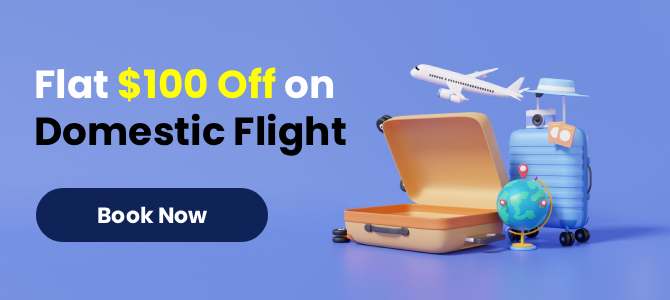
<style>
.page{position:relative;width:670px;height:300px}
.page>*{position:absolute;margin:0}
.t1{font:39px "Poppins-Bold";color:#000000}
.t2{font:39px "Poppins-Bold";color:#ffffff}
.t3{font:39px "Poppins-Bold";color:#fffe05}
.t4{font:22px "Poppins-Bold";color:#ffffff}
</style>
<div class="page">
<p class="t1" style="left:36px;top:67px;width:310px;height:89px"><span class="t2">Flat </span><span class="t3">$100 Off </span><span class="t2">on<br></span>Domestic Flight</p>
<p class="t4" style="left:98px;top:206px;width:109px;height:18px">Book Now</p>
</div>
